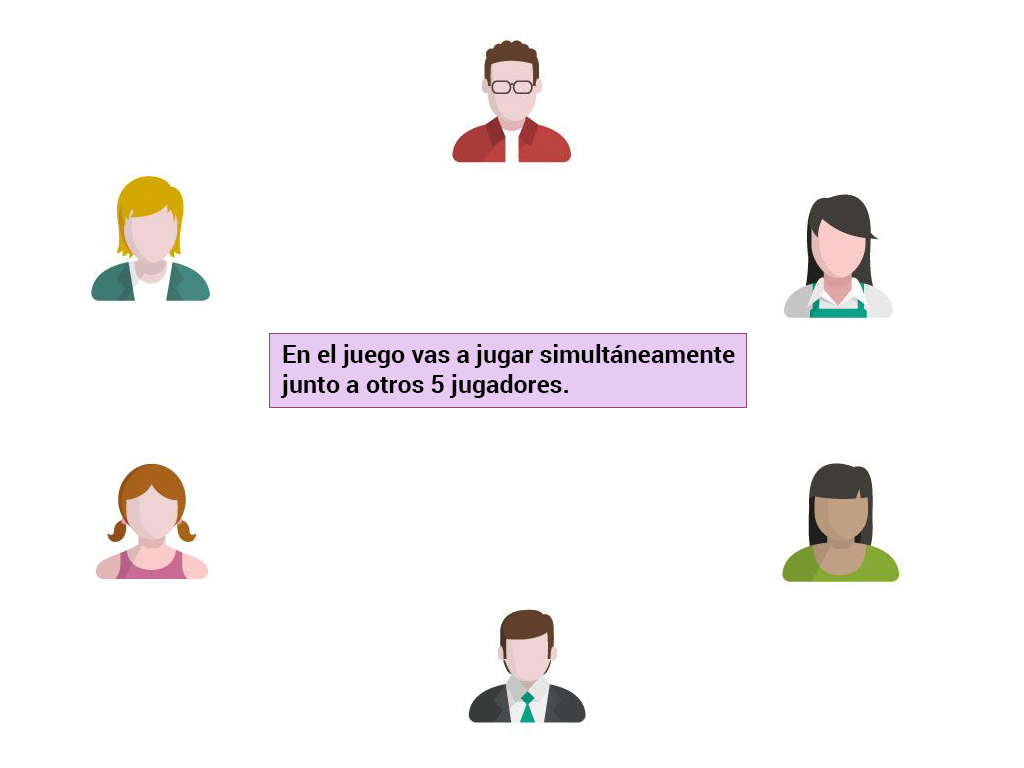
<style>
.page{position:relative;width:1024px;height:768px;background:#ffffff}
.page>*{position:absolute;margin:0}
.t1{font:25px "Roboto-Bold";color:#000000}
</style>
<div class="page">
<p class="t1" style="left:280px;top:344px;width:455px;height:54px">En el juego vas a jugar simultáneamente<br>junto a otros 5 jugadores.</p>
</div>
